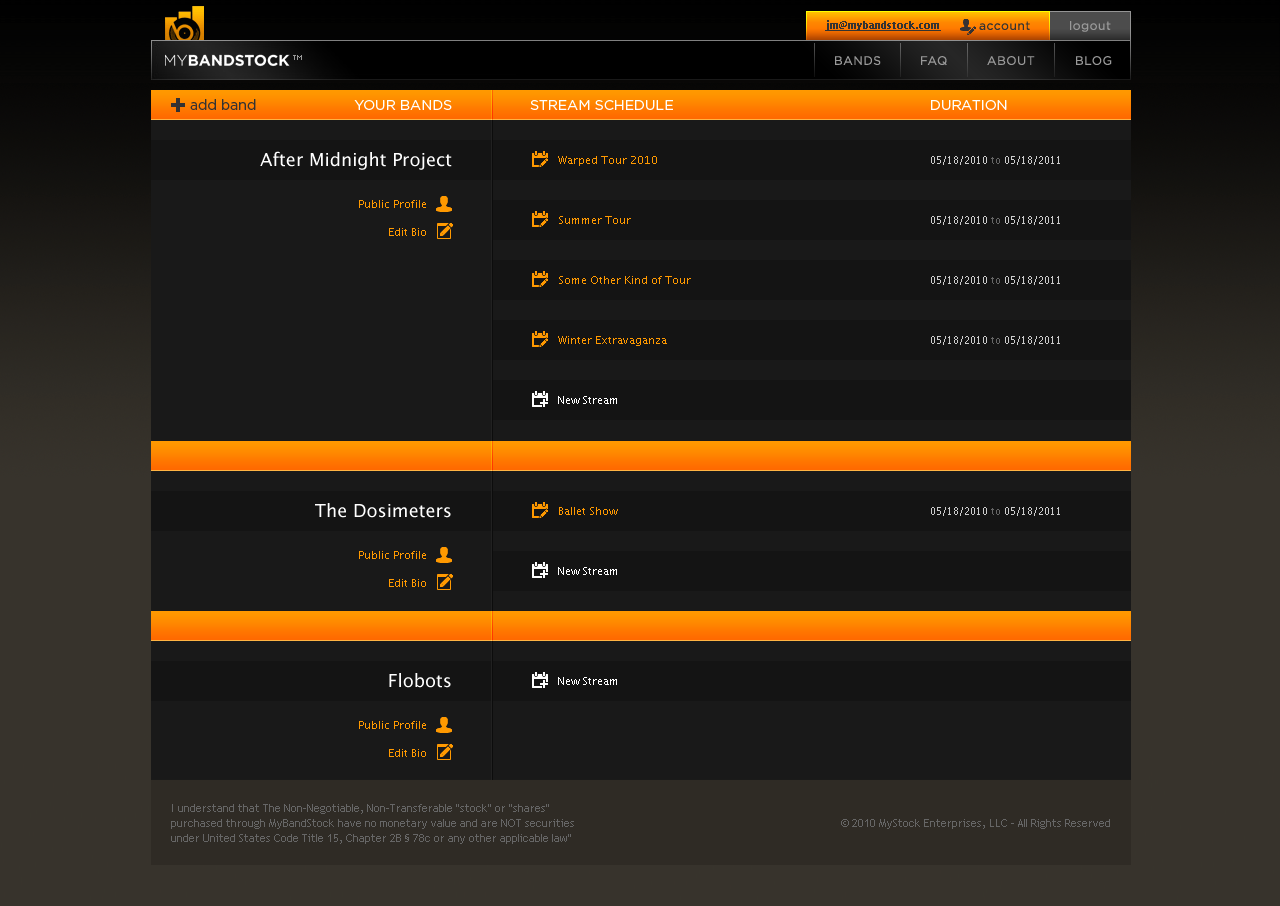
<style>
.page{position:relative;width:1280px;height:906px;background:#191919}
.page>*{position:absolute;margin:0}
.t1{font:10px "LucidaSans-Demi";color:#333333;text-decoration:underline}
.t2{font:12px "GothamBook";letter-spacing:0.05em;color:#333333}
.t3{font:12px "GothamBook";letter-spacing:0.05em;color:#999999}
.t4{font:12px "GothamBook";letter-spacing:0.05em;color:#999999;text-transform:uppercase}
.t5{font:14px "GothamBook";color:#333333}
.t6{font:14px "GothamBook";color:#ffffff}
.t7{font:18px "LucidaSans";color:#ffffff}
.t8{font:11px/20px "LucidaSans";color:#ff9900}
.t9{font:10px/20px "LucidaSans";color:#cccccc}
.t10{font:10px/20px "LucidaSans";color:#666666}
.t11{font:11px "LucidaSans";color:#ff9900}
.t12{font:11px "LucidaSans";color:#ffffff}
.t13{font:10px "LucidaSans";color:#cccccc}
.t14{font:10px "LucidaSans";color:#666666}
</style>
<div class="page">
<p class="t1" style="left:825px;top:20px;width:116px;height:11px">jm@mybandstock.com</p>
<p class="t2" style="left:979px;top:21px;width:51px;height:9px">account</p>
<p class="t3" style="left:1070px;top:21px;width:41px;height:11px">logout</p>
<p class="t4" style="left:835px;top:56px;width:46px;height:9px">bands</p>
<p class="t4" style="left:921px;top:56px;width:26px;height:10px">FAQ</p>
<p class="t4" style="left:987px;top:56px;width:48px;height:9px">ABOUT</p>
<p class="t4" style="left:1076px;top:56px;width:36px;height:9px">BLOG</p>
<p class="t5" style="left:190px;top:99px;width:66px;height:11px">add band</p>
<p class="t6" style="left:354px;top:100px;width:98px;height:10px">YOUR BANDS</p>
<p class="t6" style="left:530px;top:100px;width:143px;height:10px">STREAM SCHEDULE</p>
<p class="t6" style="left:931px;top:100px;width:76px;height:10px">DURATION</p>
<p class="t7" style="left:260px;top:151px;width:192px;height:19px">After Midnight Project</p>
<p class="t8" style="left:558px;top:156px;width:133px;height:190px">Warped Tour 2010<br><br><br>Summer Tour<br><br><br>Some Other Kind of Tour<br><br><br>Winter Extravaganza</p>
<p class="t9" style="left:931px;top:156px;width:129px;height:189px;text-align:right">05/18/2010<span class="t10"> to </span>05/18/2011<br><br><br>05/18/2010 <span class="t10">to </span>05/18/2011<br><br><br>05/18/2010 <span class="t10">to</span> 05/18/2011<br><br><br>05/18/2010 <span class="t10">to</span> 05/18/2011</p>
<p class="t11" style="left:359px;top:200px;width:67px;height:8px">Public Profile</p>
<p class="t11" style="left:389px;top:228px;width:37px;height:8px">Edit Bio</p>
<p class="t12" style="left:558px;top:396px;width:59px;height:8px">New Stream</p>
<p class="t7" style="left:315px;top:503px;width:136px;height:15px">The Dosimeters</p>
<p class="t11" style="left:559px;top:507px;width:59px;height:8px">Ballet Show</p>
<p class="t13" style="left:931px;top:507px;width:129px;height:9px">05/18/2010<span class="t14"> to </span>05/18/2011</p>
<p class="t11" style="left:359px;top:551px;width:67px;height:8px">Public Profile</p>
<p class="t12" style="left:558px;top:567px;width:59px;height:8px">New Stream</p>
<p class="t11" style="left:389px;top:579px;width:37px;height:8px">Edit Bio</p>
<p class="t7" style="left:389px;top:673px;width:62px;height:15px">Flobots</p>
<p class="t12" style="left:558px;top:677px;width:59px;height:8px">New Stream</p>
<p class="t11" style="left:359px;top:721px;width:67px;height:8px">Public Profile</p>
<p class="t11" style="left:389px;top:749px;width:37px;height:8px">Edit Bio</p>
</div>
